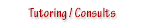
<style>
.page{position:relative;width:155px;height:26px;background:#ffffff}
.page>*{position:absolute;margin:0}
.t1{font:14px "TektonPro-BoldCond";color:#b60000}
</style>
<div class="page">
<p class="t1" style="left:28px;top:7px;width:88px;height:13px">Tutoring / Consults</p>
</div>
